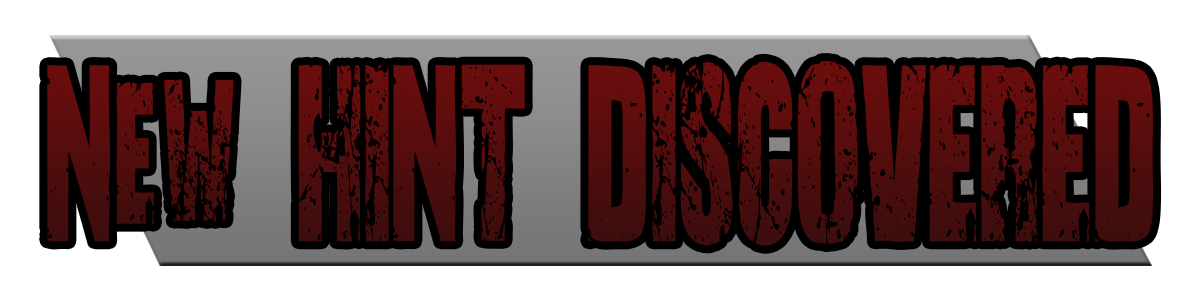
<style>
.page{position:relative;width:1200px;height:300px;background:#ffffff}
.page>*{position:absolute;margin:0}
.t1{font:267.2px "NoRverence-Regular";color:#550d0d;scale:0.5 1}
</style>
<div class="page">
<p class="t1" style="left:47px;top:61px;width:1107px;height:185px">New HINT DISCOVERED</p>
</div>
